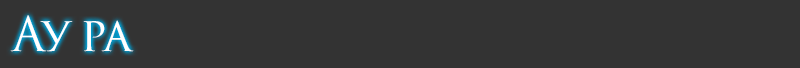
<style>
.page{position:relative;width:800px;height:68px;background:#333333}
.page>*{position:absolute;margin:0}
.t1{font:46.7px "FF14JOB";letter-spacing:-0.05em;color:#ffffff}
</style>
<div class="page">
<p class="t1" style="left:10px;top:15px;width:124px;height:37px">Ау ра</p>
</div>
